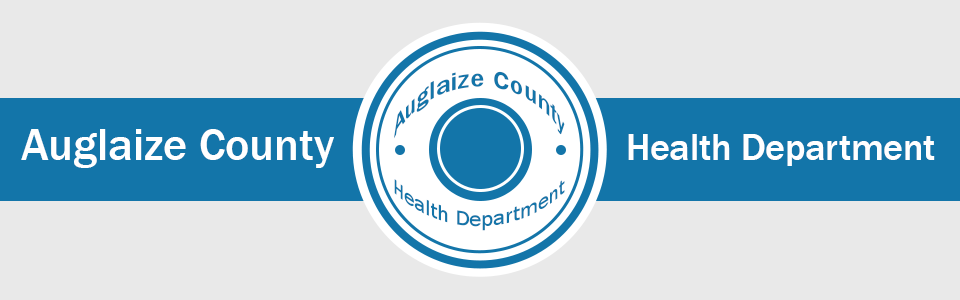
<style>
.page{position:relative;width:960px;height:300px;background:#e9e9e9}
.page>*{position:absolute;margin:0}
.t1{font:25px "FranklinGothic-Medium";color:#1375a9}
.t2{font:45.8px "FranklinGothic-Medium";color:#ffffff}
.t3{font:37.5px "FranklinGothic-Medium";color:#ffffff}
.t4{font:20.8px "FranklinGothic-Medium";color:#1375a9}
</style>
<div class="page">
<p class="t1" style="left:393px;top:71px;width:172px;height:68px;text-align:center">Auglaize County</p>
<p class="t2" style="left:21px;top:129px;width:313px;height:39px">Auglaize County</p>
<p class="t3" style="left:628px;top:134px;width:307px;height:32px">Health Department</p>
<p class="t4" style="left:394px;top:179px;width:171px;height:52px;text-align:center">Health Department</p>
</div>
